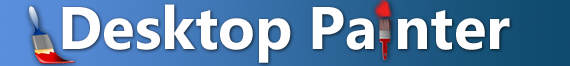
<style>
.page{position:relative;width:570px;height:66px;background:#ffffff}
.page>*{position:absolute;margin:0}
.t1{font:60px "SegoeUI-Bold";color:#ffffff}
</style>
<div class="page">
<p class="t1" style="left:62px;top:4px;width:448px;height:59px">Desktop Pa nter</p>
</div>
